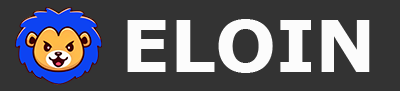
<style>
.page{position:relative;width:400px;height:91px;background:#333333}
.page>*{position:absolute;margin:0}
.t1{font:72px "Verdana-Bold";letter-spacing:-0.005em;color:#fcfcfc}
</style>
<div class="page">
<p class="t1" style="left:127px;top:19px;width:243px;height:54px">ELOIN</p>
</div>
